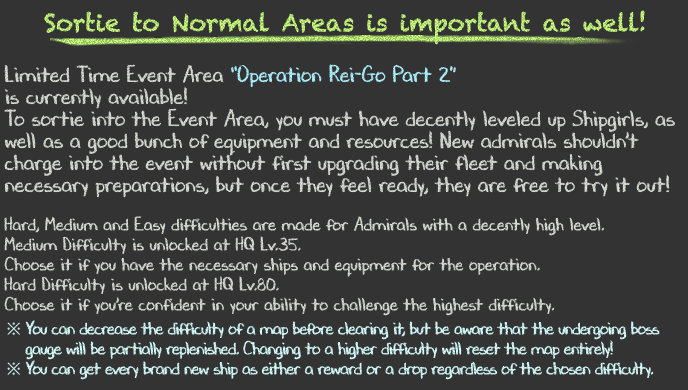
<style>
.page{position:relative;width:688px;height:390px;background:#333333}
.page>*{position:absolute;margin:0}
.t1{font:24px "Chalkduster"}
.t2{font:22px/22px "DJBChalkItUp";color:#d9ded6}
.t3{font:22px/22px "DJBChalkItUp";color:#adf2ff}
.t4{font:18px/20px "DJBChalkItUp";color:#d9ded6}
.t5{font:18px/24px "DJBChalkItUp";color:#d9ded6}
.t6{font:18px/20px "TimesNewRomanPSMT";letter-spacing:-0.04em;color:#d7feff}
.t7{font:18px/20px "DJBChalkItUp";letter-spacing:-0.04em;color:#d7feff}
</style>
<div class="page">
<p class="t1" style="left:44px;top:10px;width:601px;height:35px">Sortie to Normal Areas is important as well!</p>
<p class="t2" style="left:4px;top:64px;width:671px;height:316px">Limited Time Event Area <span class="t3">“Operation Rei-Go Part 2”<br></span>is currently available!<br>To sortie into the Event Area, you must have decently leveled up Shipgirls, as<br>well as a good bunch of equipment and resources! New admirals shouldn’t<br>charge into the event without first upgrading their fleet and making<br>necessary preparations, but once they feel ready, they are free to try it out!<br><br><span class="t4">Hard, Medium and Easy difficulties are made for Admirals with a decently high level.<br>Medium Difficulty is unlocked at HQ Lv.35.<br>Choose it if you have the necessary ships and equipment for the operation.<br>Hard Difficulty is unlocked at HQ Lv.80.<br></span><span class="t5">Choose it if you’re confident in your ability to challenge the highest difficulty.<br></span><span class="t6">※ </span><span class="t7">You can decrease the difficulty of a map before clearing it, but be aware that the undergoing boss<br>　 gauge will be partially replenished. Changing to a higher difficulty will reset the map entirely!<br></span><span class="t6">※ </span><span class="t7">You can get every brand new ship as either a reward or a drop regardless of the chosen difficulty.</span></p>
</div>
